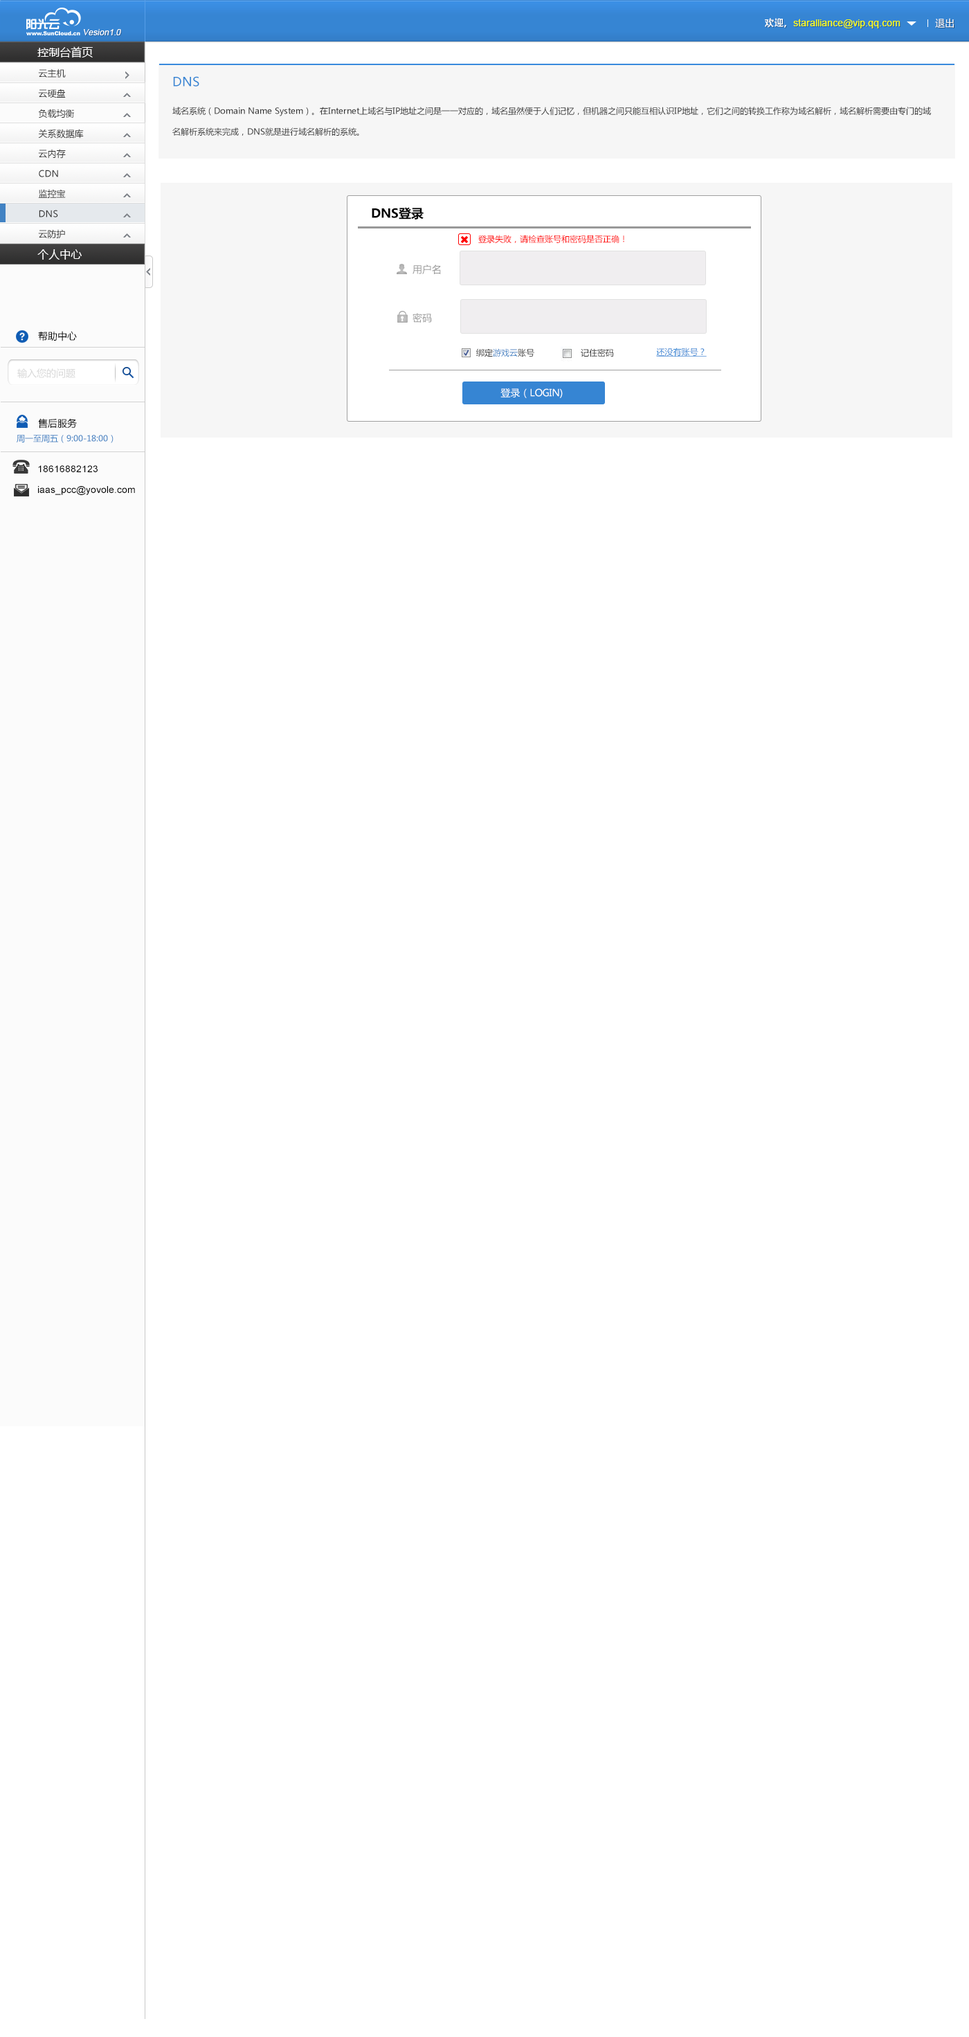
<style>
.page{position:relative;width:969px;height:2037px;background:#ffffff}
.page>*{position:absolute;margin:0}
.t1{font:8.3px "ArialMT";color:#ffffff;font-style:italic}
.t2{font:9.7px "ArialMT";color:#fcff0e}
.t3{font:9.7px "AdobeHeitiStd-Regular";color:#ffffff}
.t4{font:9.7px "MicrosoftYaHei";color:#ffffff}
.t5{font:11.1px "MicrosoftYaHei";color:#ffffff}
.t6{font:9px "MicrosoftYaHei";color:#333333}
.t7{font:12.5px "MicrosoftYaHei";color:#3685d3}
.t8{font:8.3px/20.8px "MicrosoftYaHei";color:#333333}
.t9{font:12.5px "MicrosoftYaHei-Bold";color:#000000}
.t10{font:8.3px "MicrosoftYaHei";color:#ff0101}
.t11{font:9.7px "MicrosoftYaHei";color:#999999}
.t12{font:9.7px "MicrosoftYaHei";color:#000000}
.t13{font:8.3px "MicrosoftYaHei";color:#4182c3}
.t14{font:8.3px "MicrosoftYaHei";color:#333333}
.t15{font:8.3px "MicrosoftYaHei";color:#3685d3;text-decoration:underline}
.t16{font:9.7px "MicrosoftYaHei";color:#d7d7d7}
.t17{font:9.7px/6.9px "ArialMT";color:#000000}
</style>
<div class="page">
<p class="t1" style="left:84px;top:29px;width:37px;height:6px">Vesion1.0</p>
<p class="t2" style="left:765px;top:18px;width:136px;height:10px"><span class="t3">欢迎，</span>staralliance@vip.qq.com</p>
<p class="t4" style="left:935px;top:18px;width:19px;height:10px">退出</p>
<p class="t5" style="left:37px;top:46px;width:56px;height:12px">控制台首页</p>
<p class="t6" style="left:38px;top:69px;width:28px;height:9px">云主机</p>
<p class="t7" style="left:173px;top:76px;width:26px;height:11px">DNS</p>
<p class="t6" style="left:38px;top:89px;width:28px;height:9px">云硬盘</p>
<p class="t6" style="left:38px;top:109px;width:36px;height:9px">负载均衡</p>
<p class="t8" style="left:172px;top:107px;width:759px;height:29px">域名系统（Domain Name System）。在Internet上域名与IP地址之间是一一对应的，域名虽然便于人们记忆，但机器之间只能互相认识IP地址，它们之间的转换工作称为域名解析，域名解析需要由专门的域名解析系统来完成，DNS就是进行域名解析的系统。</p>
<p class="t6" style="left:38px;top:129px;width:46px;height:9px">关系数据库</p>
<p class="t6" style="left:38px;top:149px;width:28px;height:10px">云内存</p>
<p class="t6" style="left:39px;top:170px;width:19px;height:7px">CDN</p>
<p class="t6" style="left:38px;top:189px;width:28px;height:9px">监控宝</p>
<p class="t6" style="left:39px;top:210px;width:19px;height:7px">DNS</p>
<p class="t9" style="left:372px;top:207px;width:52px;height:12px">DNS登录</p>
<p class="t6" style="left:38px;top:229px;width:27px;height:10px">云防护</p>
<p class="t10" style="left:478px;top:235px;width:146px;height:9px">登录失败，请检查账号和密码是否正确！</p>
<p class="t5" style="left:37px;top:249px;width:45px;height:11px">个人中心</p>
<p class="t11" style="left:413px;top:264px;width:28px;height:10px">用户名</p>
<p class="t11" style="left:413px;top:313px;width:19px;height:10px">密码</p>
<p class="t12" style="left:38px;top:331px;width:39px;height:10px">帮助中心</p>
<p class="t13" style="left:476px;top:348px;width:58px;height:9px"><span class="t14">绑定</span>游戏云<span class="t14">账号</span></p>
<p class="t14" style="left:581px;top:348px;width:33px;height:9px">记住密码</p>
<p class="t15" style="left:656px;top:348px;width:51px;height:9px">还没有账号？</p>
<p class="t16" style="left:17px;top:368px;width:58px;height:10px">输入您的问题</p>
<p class="t4" style="left:501px;top:388px;width:62px;height:10px">登录（LOGIN)</p>
<p class="t12" style="left:38px;top:418px;width:39px;height:11px">售后服务</p>
<p class="t13" style="left:17px;top:435px;width:97px;height:8px">周一至周五（9:00-18:00）</p>
<p class="t17" style="left:38px;top:465px;width:97px;height:30px">18616882123   <br><br><br>iaas_pcc@yovole.com</p>
</div>
